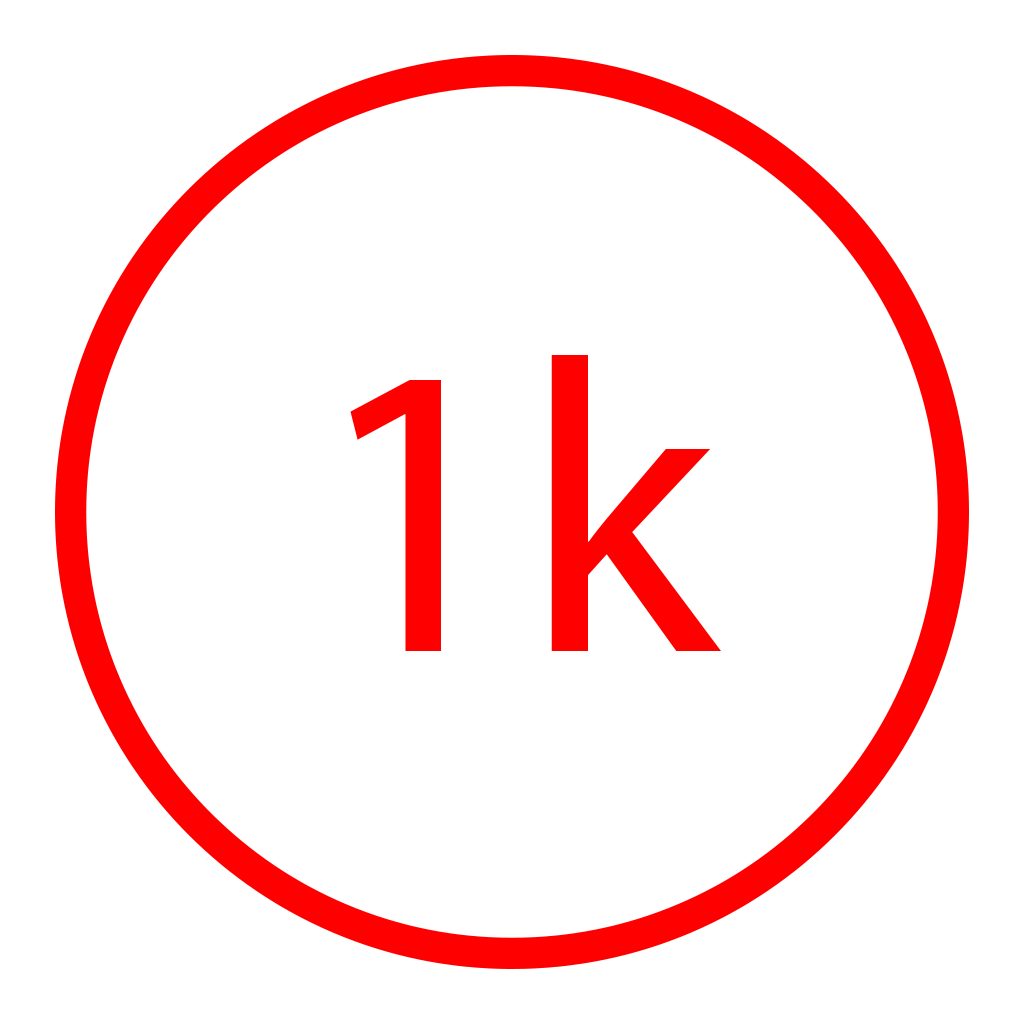
<style>
.page{position:relative;width:1024px;height:1024px;background:#ffffff}
.page>*{position:absolute;margin:0}
.t1{font:416.7px "MyriadPro-Regular";color:#ff0000}
</style>
<div class="page">
<p class="t1" style="left:350px;top:355px;width:371px;height:296px">1k</p>
</div>
